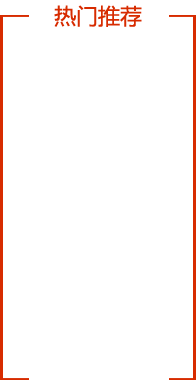
<style>
.page{position:relative;width:196px;height:380px;background:#ffffff}
.page>*{position:absolute;margin:0}
.t1{font:22px "MicrosoftYaHei";color:#d72b00}
</style>
<div class="page">
<p class="t1" style="left:54px;top:5px;width:88px;height:22px">热门推荐</p>
</div>
